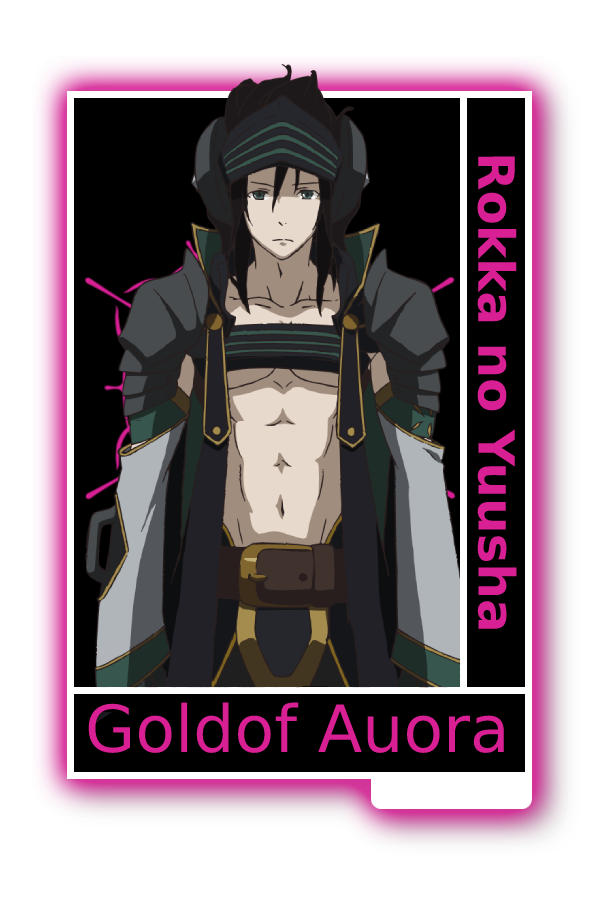
<style>
.page{position:relative;width:600px;height:900px;background:#ffffff}
.page>*{position:absolute;margin:0}
.t1{font:50px "MADETOMMY-Bold";color:#d81f94}
.t2{font:65px "CoolveticaRg-Regular";color:#d81f94}
</style>
<div class="page">
<p class="t1" style="left:477px;top:156px;width:40px;height:473px;rotate:90deg">Rokka no Yuusha</p>
<p class="t2" style="left:88px;top:702px;width:416px;height:51px">Goldof Auora</p>
</div>
